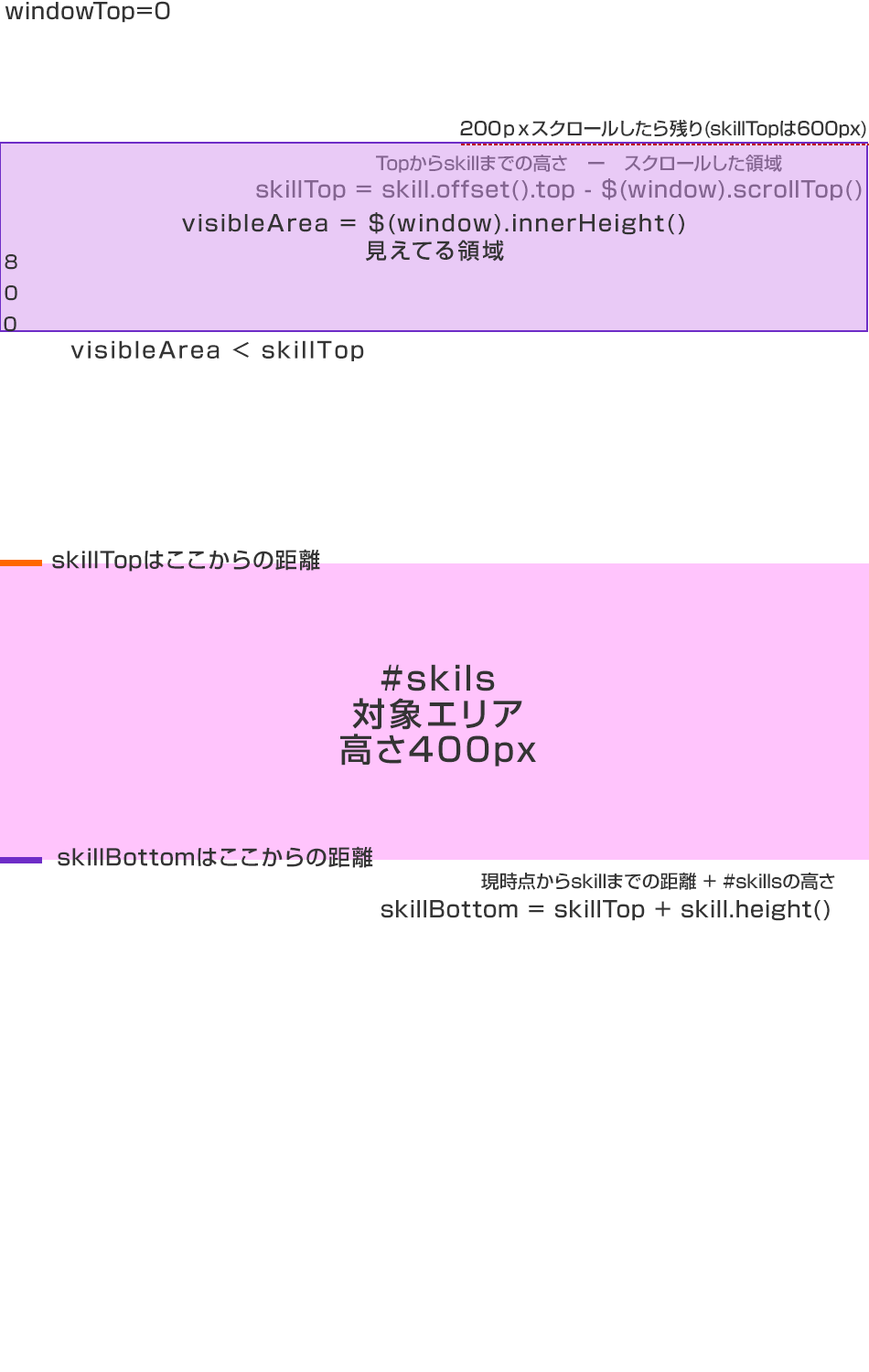
<style>
.page{position:relative;width:869px;height:1372px;background:#ffffff}
.page>*{position:absolute;margin:0}
.t1{font:22px "ShinGoPro-Medium";letter-spacing:0.05em;color:#343434}
.t2{font:18.3px "ShinGoPro-Medium";color:#343434}
.t3{font:18.3px "ShinGoPro-Medium";color:#846591}
.t4{font:22px "ShinGoPro-Medium";letter-spacing:0.05em;color:#846591}
.t5{font:22px/27.4px "ShinGoPro-Medium";letter-spacing:0.1em;color:#343434}
.t6{font:22px "ShinGoPro-Medium";letter-spacing:0.1em;color:#343434}
.t7{font:32.9px/35.7px "ShinGoPro-Medium";letter-spacing:0.1em;color:#343434}
</style>
<div class="page">
<p class="t1" style="left:5px;top:1px;width:165px;height:22px">windowTop=0</p>
<p class="t2" style="left:460px;top:119px;width:406px;height:19px">200ｐｘスクロールしたら残り(skillTopは600px)</p>
<p class="t3" style="left:376px;top:155px;width:406px;height:18px">Topからskillまでの高さ　ー　スクロールした領域</p>
<p class="t4" style="left:256px;top:178px;width:606px;height:23px">skillTop = skill.offset().top - $(window).scrollTop()</p>
<p class="t5" style="left:182px;top:212px;width:502px;height:50px;text-align:center">visibleArea = $(window).innerHeight()<br>見えてる領域</p>
<p class="t2" style="left:5px;top:254px;width:12px;height:16px">8</p>
<p class="t2" style="left:5px;top:285px;width:12px;height:16px">0</p>
<p class="t2" style="left:4px;top:317px;width:12px;height:15px">0</p>
<p class="t6" style="left:70px;top:340px;width:294px;height:21px">visibleArea &lt; skillTop</p>
<p class="t1" style="left:52px;top:549px;width:268px;height:23px">skillTopはここからの距離</p>
<p class="t7" style="left:340px;top:664px;width:196px;height:103px;text-align:center">#skils<br>対象エリア<br>高さ400px</p>
<p class="t1" style="left:58px;top:846px;width:315px;height:22px">skillBottomはここからの距離</p>
<p class="t2" style="left:481px;top:872px;width:354px;height:18px">現時点からskillまでの距離 + #skillsの高さ</p>
<p class="t1" style="left:381px;top:900px;width:449px;height:21px">skillBottom = skillTop + skill.height()</p>
</div>
